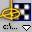
<style>
.page{position:relative;width:32px;height:32px;background:#c1c1c1}
.page>*{position:absolute;margin:0}
.t1{font:8px "Small Fonts";color:#000000}
</style>
<div class="page">
<p class="t1" style="left:3px;top:23px;width:14px;height:6px">c:\...</p>
</div>
